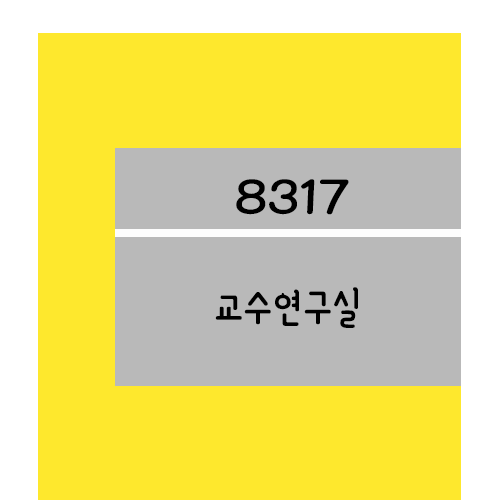
<style>
.page{position:relative;width:500px;height:500px;background:#fee82d}
.page>*{position:absolute;margin:0}
.t1{font:61.2px "YanoljaYacheR";color:#000000;scale:1.18 1}
.t2{font:48px "YanoljaYacheR";color:#000000}
</style>
<div class="page">
<p class="t1" style="left:236px;top:179px;width:113px;height:36px">8317</p>
<p class="t2" style="left:215px;top:287px;width:143px;height:41px">교수연구실</p>
</div>
